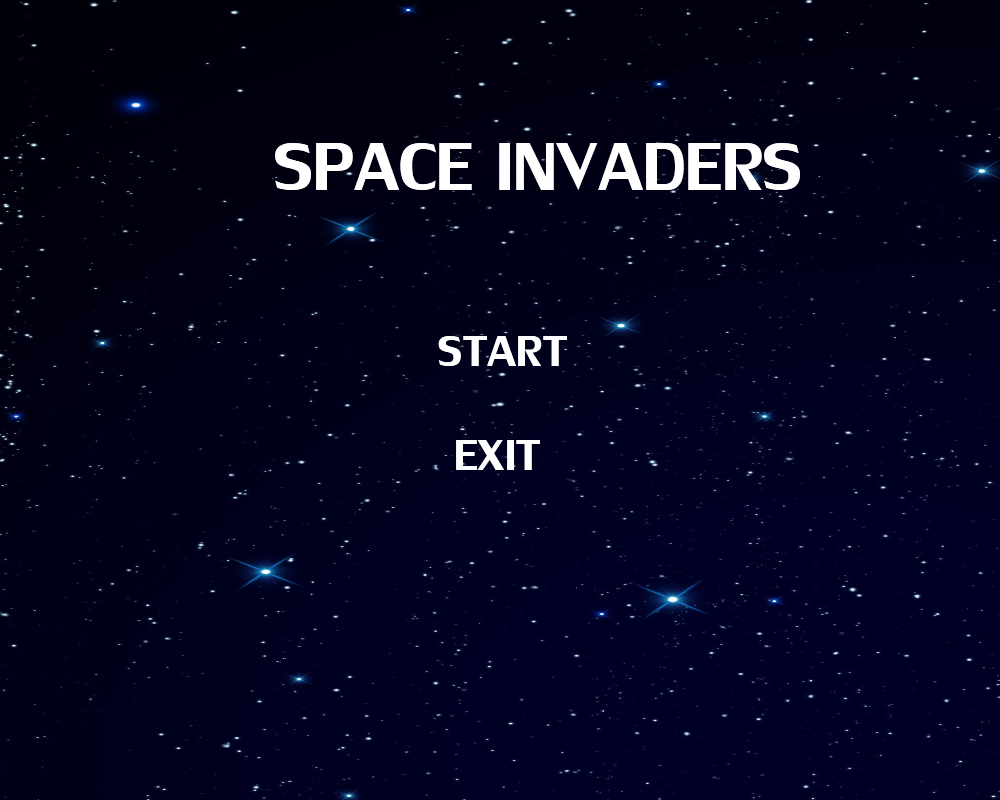
<style>
.page{position:relative;width:1000px;height:800px}
.page>*{position:absolute;margin:0}
.t1{font:101px "LilyUPC";color:#ffffff}
.t2{font:65px "LilyUPC";color:#ffffff}
</style>
<div class="page">
<p class="t1" style="left:275px;top:143px;width:525px;height:47px">SPACE INVADERS</p>
<p class="t2" style="left:438px;top:336px;width:129px;height:30px">START</p>
<p class="t2" style="left:456px;top:440px;width:84px;height:30px">EXIT</p>
</div>
